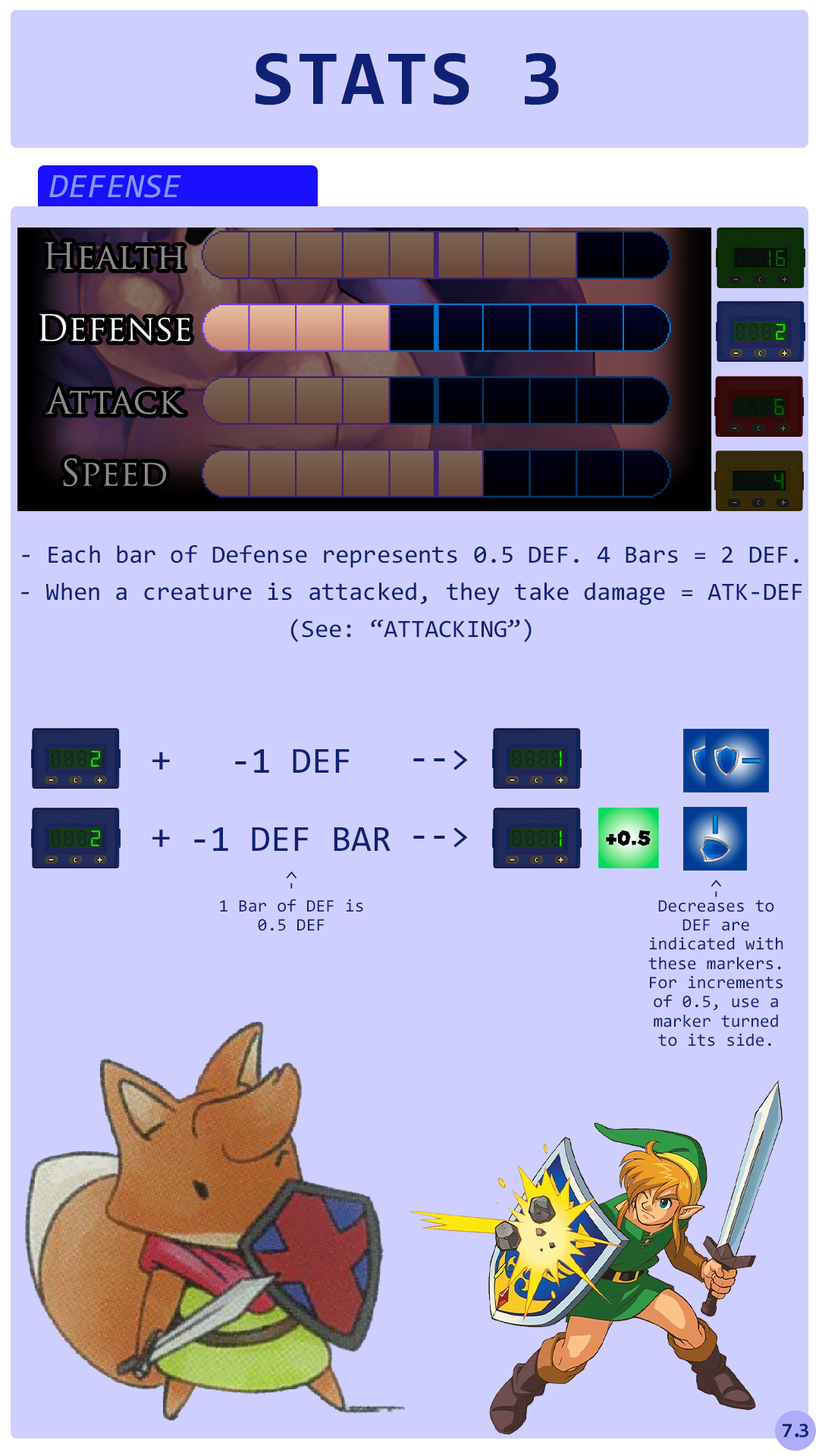
<style>
.page{position:relative;width:819px;height:1456px;background:#cfcfff}
.page>*{position:absolute;margin:0}
.t1{font:78.3px "Consolas-Bold";letter-spacing:0.02em;color:#102175}
.t2{font:34.3px "Consolas-Italic";color:#8196fc}
.t3{font:24.4px "Digital-7";letter-spacing:0.12em;color:#086100}
.t4{font:24.4px "Digital-7";letter-spacing:0.12em;color:#12dc01}
.t5{font:25px/37.2px "Consolas";color:#102175}
.t6{font:36.7px "Consolas";color:#102175}
.t7{font:19.1px "Consolas";color:#102175}
.t8{font:17.7px/19.2px "Consolas";color:#102175}
.t9{font:20.5px "Consolas-Bold";letter-spacing:-0.06em;color:#102175}
.t10{font:20.5px "Consolas-Bold";letter-spacing:-0.22em;color:#102175}
</style>
<div class="page">
<p class="t1" style="left:255px;top:53px;width:304px;height:52px">STATS 3</p>
<p class="t2" style="left:49px;top:174px;width:132px;height:24px">DEFENSE</p>
<p class="t3" style="left:769px;top:250px;width:16px;height:16px">16</p>
<p class="t4" style="left:776px;top:324px;width:9px;height:16px">2</p>
<p class="t3" style="left:774px;top:399px;width:10px;height:16px">6</p>
<p class="t3" style="left:774px;top:473px;width:9px;height:16px">4</p>
<p class="t5" style="left:21px;top:545px;width:781px;height:97px;text-align:justify">- Each bar of Defense represents 0.5 DEF. 4 Bars = 2 DEF.<br>- When a creature is attacked, they take damage = ATK-DEF (See: “ATTACKING”)</p>
<p class="t6" style="left:235px;top:749px;width:115px;height:24px">-1 DEF</p>
<p class="t6" style="left:413px;top:750px;width:55px;height:20px">--&gt;</p>
<p class="t4" style="left:91px;top:751px;width:9px;height:16px">2</p>
<p class="t6" style="left:152px;top:752px;width:18px;height:18px">+</p>
<p class="t4" style="left:560px;top:751px;width:2px;height:16px">1</p>
<p class="t4" style="left:91px;top:830px;width:9px;height:16px">2</p>
<p class="t6" style="left:152px;top:830px;width:18px;height:17px">+</p>
<p class="t6" style="left:194px;top:827px;width:197px;height:24px">-1 DEF BAR</p>
<p class="t6" style="left:413px;top:827px;width:55px;height:21px">--&gt;</p>
<p class="t4" style="left:560px;top:830px;width:2px;height:16px">1</p>
<p class="t7" style="left:286px;top:871px;width:11px;height:18px;rotate:-90deg">-&gt;</p>
<p class="t7" style="left:711px;top:880px;width:11px;height:17px;rotate:-90deg">-&gt;</p>
<p class="t8" style="left:220px;top:899px;width:143px;height:32px;text-align:center">1 Bar of DEF is 0.5 DEF</p>
<p class="t8" style="left:648px;top:899px;width:135px;height:147px;text-align:center">Decreases to DEF are indicated with these markers. For increments of 0.5, use a marker turned to its side.</p>
<p class="t9" style="left:783px;top:1423px;width:25px;height:15px">7<span class="t10">.</span>3</p>
</div>
